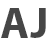
<style>
.page{position:relative;width:48px;height:48px;background:#ffffff}
.page>*{position:absolute;margin:0}
.t1{font:44.1px "MyriadPro-Bold";color:#464646}
</style>
<div class="page">
<p class="t1" style="left:1px;top:8px;width:45px;height:30px">AJ</p>
</div>
